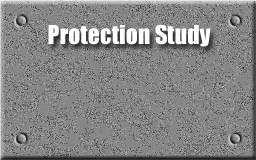
<style>
.page{position:relative;width:256px;height:160px;background:#878787}
.page>*{position:absolute;margin:0}
.t1{font:24px "Impact";color:#ffffff}
</style>
<div class="page">
<p class="t1" style="left:48px;top:24px;width:163px;height:23px">Protection Study</p>
</div>
